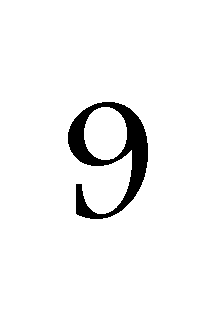
<style>
.page{position:relative;width:222px;height:323px;background:#ffffff}
.page>*{position:absolute;margin:0}
.t1{font:180px "FootlightMTLight";color:#000000}
</style>
<div class="page">
<p class="t1" style="left:68px;top:102px;width:80px;height:117px">9</p>
</div>
